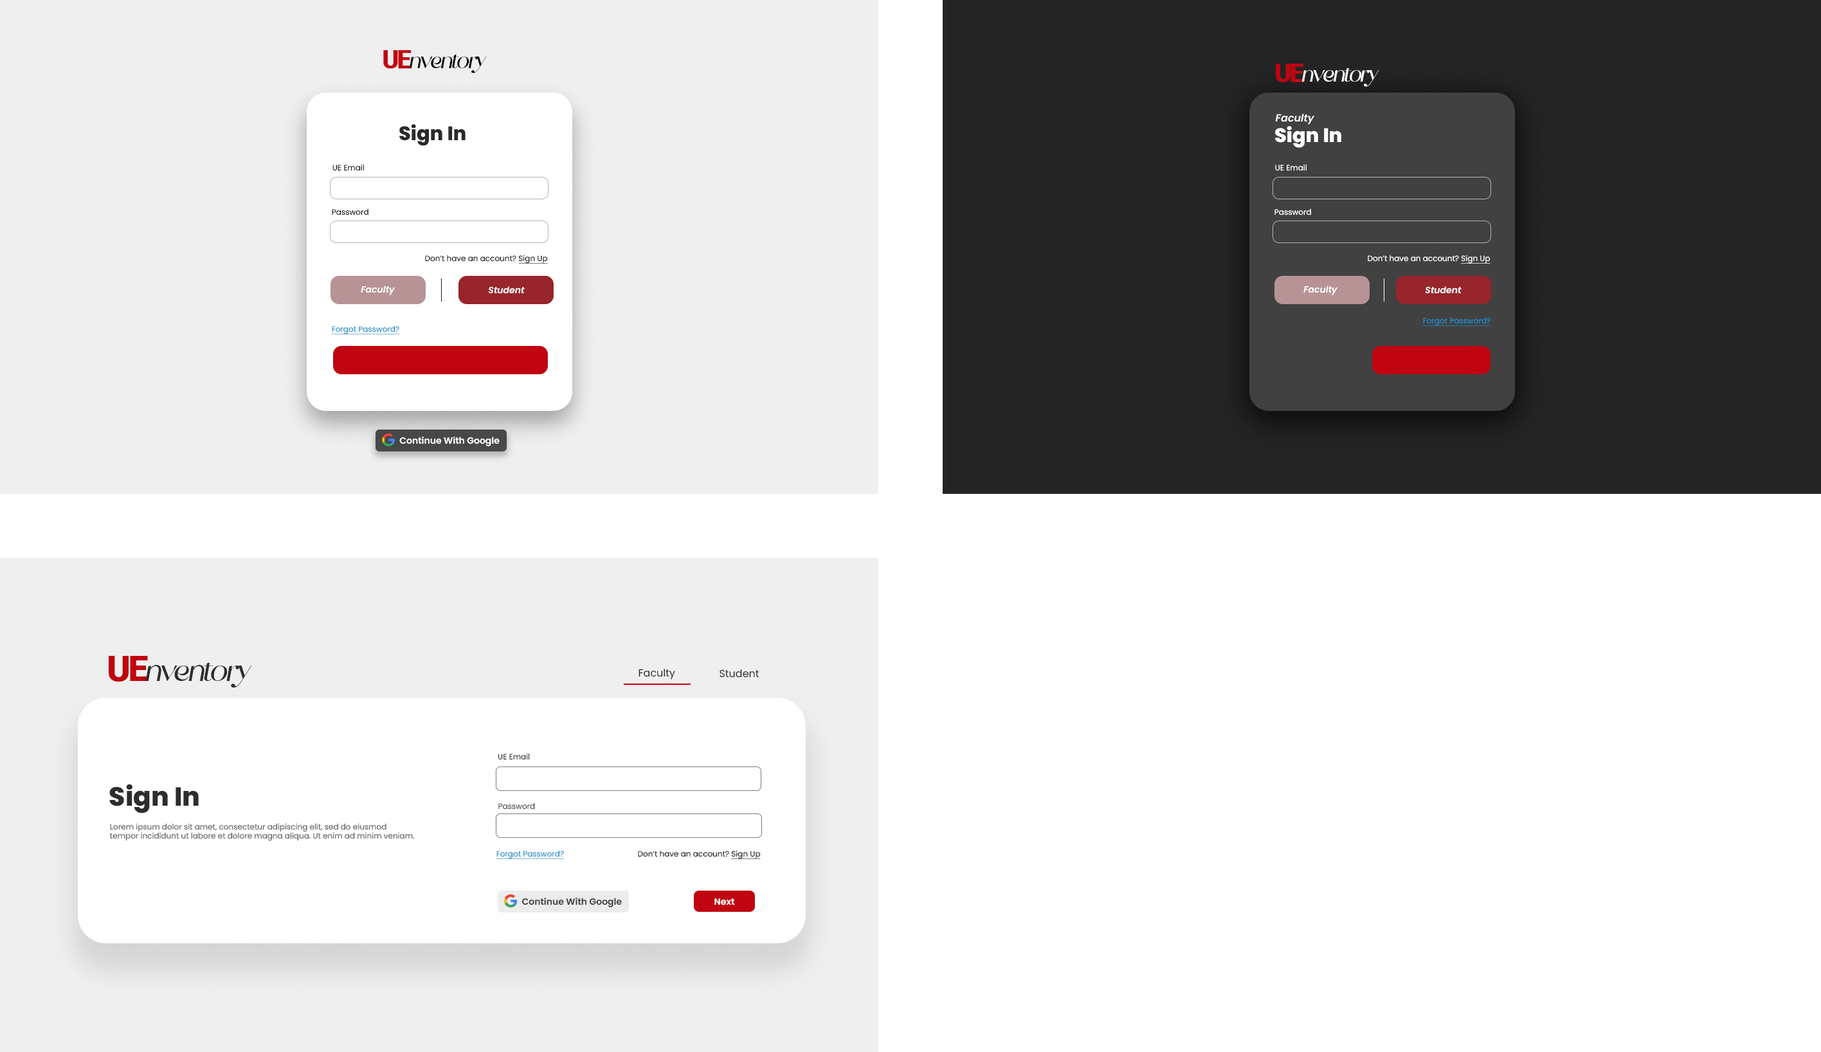
<style>
.page{position:relative;width:1821px;height:1052px;background:#ffffff}
.page>*{position:absolute;margin:0}
.t1{font:25px "Roboto-Bold";letter-spacing:-0.075em;color:#c00411;font-weight:bold}
.t2{font:25px "SoftAuraFree-Regular";letter-spacing:-0.075em;color:#000000;font-style:italic}
.t3{font:25px "SoftAuraFree-Regular";letter-spacing:-0.075em;color:#ffffff;font-style:italic}
.t4{font:10.3px "Poppins-SemiBoldItalic";color:#ffffff}
.t5{font:19.5px "Poppins-ExtraBold";color:#2a2a2a}
.t6{font:19.5px "Poppins-ExtraBold";color:#ffffff}
.t7{font:7.7px "Poppins-Regular";color:#0c0c0c}
.t8{font:7.7px "Poppins-Regular";color:#ffffff}
.t9{font:7.7px "Poppins-Regular";color:#0c0c0c;text-decoration:underline}
.t10{font:7.7px "Poppins-Regular";color:#ffffff;text-decoration:underline}
.t11{font:9px "Poppins-SemiBoldItalic";color:#ffffff}
.t12{font:7.7px "Poppins-Regular";color:#1b8dc8;text-decoration:underline}
.t13{font:9px "Poppins-SemiBold";color:#ffffff}
.t14{font:34.5px "Roboto-Bold";letter-spacing:-0.075em;color:#c00411;font-weight:bold}
.t15{font:34.5px "SoftAuraFree-Regular";letter-spacing:-0.075em;color:#2d2d2d;font-style:italic}
.t16{font:10.3px "Poppins-Regular";color:#2a2a2a}
.t17{font:7.7px "Poppins-Regular";color:#333333}
.t18{font:26.2px "Poppins-ExtraBold";color:#2d2d2d}
.t19{font:7.7px "Poppins-Regular";color:#484848}
.t20{font:7.7px "Poppins-Regular";color:#5e5e5e}
.t21{font:9px "Poppins-SemiBold";color:#3e3e3e}
</style>
<div class="page">
<p class="t1" style="left:383px;top:50px;width:28px;height:19px">UE</p>
<p class="t2" style="left:409px;top:54px;width:78px;height:19px">nventory</p>
<p class="t1" style="left:1275px;top:64px;width:29px;height:18px">UE</p>
<p class="t3" style="left:1301px;top:68px;width:78px;height:19px">nventory</p>
<p class="t4" style="left:1275px;top:114px;width:39px;height:11px">Faculty</p>
<p class="t5" style="left:399px;top:124px;width:66px;height:22px">Sign In</p>
<p class="t6" style="left:1275px;top:126px;width:66px;height:22px">Sign In</p>
<p class="t7" style="left:332px;top:164px;width:32px;height:7px">UE Email</p>
<p class="t8" style="left:1275px;top:164px;width:31px;height:7px">UE Email</p>
<p class="t7" style="left:332px;top:208px;width:36px;height:7px">Password</p>
<p class="t8" style="left:1274px;top:208px;width:37px;height:7px">Password</p>
<p class="t7" style="left:425px;top:255px;width:123px;height:9px">Don’t have an account? <span class="t9">Sign Up</span></p>
<p class="t8" style="left:1367px;top:255px;width:123px;height:9px">Don’t have an account? <span class="t10">Sign Up</span></p>
<p class="t11" style="left:361px;top:285px;width:34px;height:10px">Faculty</p>
<p class="t11" style="left:488px;top:286px;width:37px;height:8px">Student</p>
<p class="t11" style="left:1303px;top:285px;width:34px;height:10px">Faculty</p>
<p class="t11" style="left:1425px;top:286px;width:36px;height:8px">Student</p>
<p class="t12" style="left:1422px;top:317px;width:69px;height:9px">Forgot Password?</p>
<p class="t12" style="left:331px;top:325px;width:69px;height:9px">Forgot Password?</p>
<p class="t13" style="left:399px;top:436px;width:100px;height:10px">Continue With Google</p>
<p class="t14" style="left:109px;top:656px;width:39px;height:25px">UE</p>
<p class="t15" style="left:145px;top:662px;width:107px;height:26px">nventory</p>
<p class="t16" style="left:638px;top:669px;width:37px;height:10px">Faculty</p>
<p class="t16" style="left:719px;top:669px;width:40px;height:9px">Student</p>
<p class="t17" style="left:498px;top:753px;width:32px;height:7px">UE Email</p>
<p class="t18" style="left:109px;top:784px;width:90px;height:29px">Sign In</p>
<p class="t19" style="left:498px;top:802px;width:37px;height:7px">Password</p>
<p class="t20" style="left:109px;top:823px;width:306px;height:18px">Lorem ipsum dolor sit amet, consectetur adipiscing elit, sed do eiusmod <br>tempor incididunt ut labore et dolore magna aliqua. Ut enim ad minim veniam.</p>
<p class="t12" style="left:496px;top:850px;width:68px;height:9px">Forgot Password?</p>
<p class="t7" style="left:638px;top:850px;width:122px;height:9px">Don’t have an account? <span class="t9">Sign Up</span></p>
<p class="t21" style="left:521px;top:897px;width:101px;height:10px">Continue With Google</p>
<p class="t13" style="left:714px;top:898px;width:21px;height:7px">Next</p>
</div>
